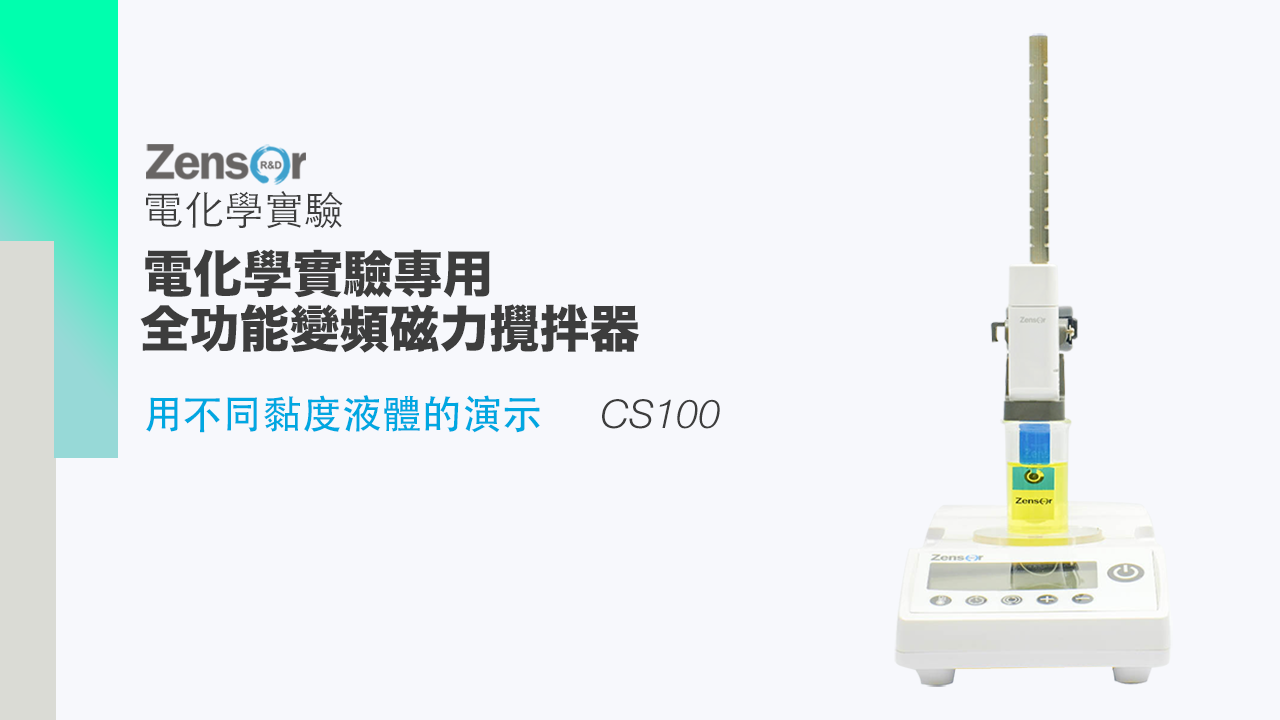
<style>
.page{position:relative;width:1280px;height:720px;background:#f7f8fc}
.page>*{position:absolute;margin:0}
.t1{font:40px "STHeitiTC-Light";color:#3d3d3d}
.t2{font:50px "HiraKakuStd-W8";color:#3d3d3d}
.t3{font:40px "STHeitiTC-Medium";color:#00a7e1}
.t4{font:40px "HelveticaNeueLTPro-LtIt";color:#3d3d3d}
</style>
<div class="page">
<p class="t1" style="left:146px;top:191px;width:197px;height:38px">電化學實驗</p>
<p class="t2" style="left:145px;top:249px;width:345px;height:49px">電化學實驗專用</p>
<p class="t2" style="left:140px;top:304px;width:499px;height:49px">全功能變頻磁力攪拌器</p>
<p class="t3" style="left:146px;top:395px;width:394px;height:38px">用不同黏度液體的演示</p>
<p class="t4" style="left:602px;top:399px;width:118px;height:30px">CS100</p>
</div>
